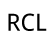
<style>
.page{position:relative;width:53px;height:41px;background:#ffffff}
.page>*{position:absolute;margin:0}
.t1{font:23.7px "DroidSans";color:#000000}
</style>
<div class="page">
<p class="t1" style="left:8px;top:13px;width:39px;height:18px">RCL</p>
</div>
